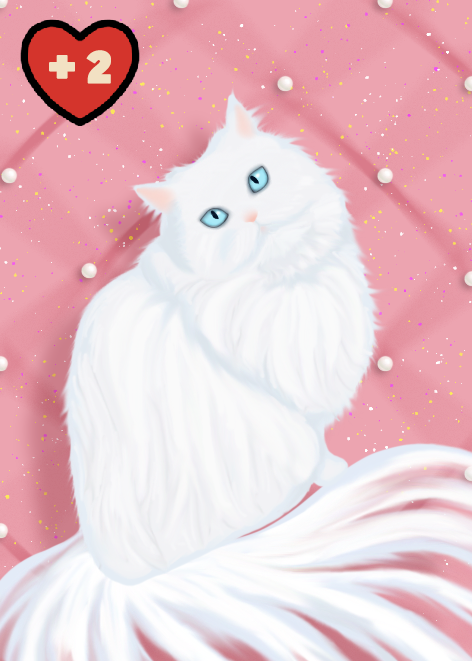
<style>
.page{position:relative;width:472px;height:661px}
.page>*{position:absolute;margin:0}
.t1{font:50px "Filicudi-Solid";letter-spacing:0.13em;color:#f2e1c3;font-weight:bold;scale:1.1 1}
</style>
<div class="page">
<p class="t1" style="left:49px;top:50px;width:62px;height:34px">+2</p>
</div>
